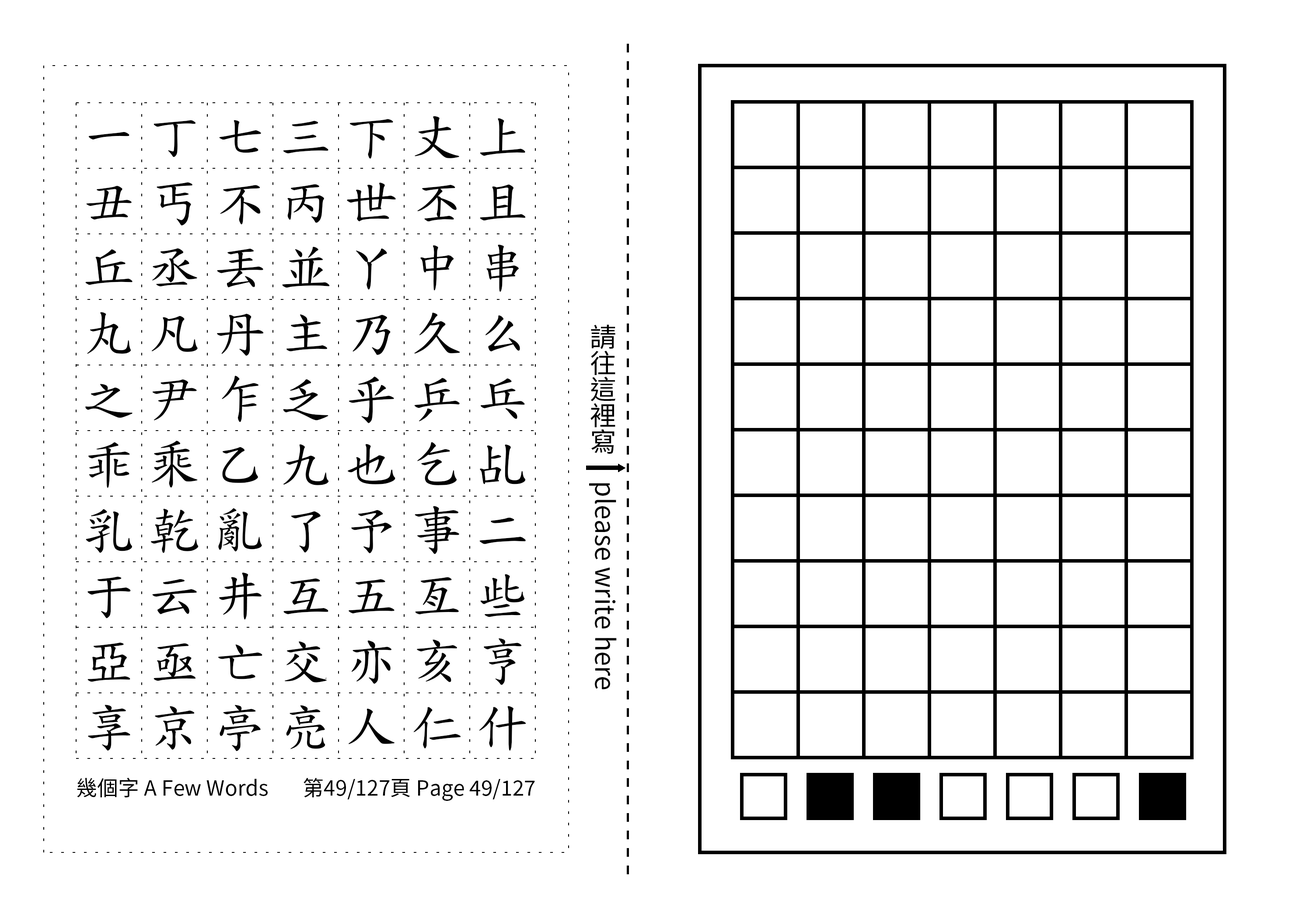
<style>
.page{position:relative;width:1299px;height:918px;background:#ffffff}
.page>*{position:absolute;margin:0}
.t1{font:52.5px/65.6px "TW-Kai-98_1";letter-spacing:0.25em;color:#000000}
.t2{font:26.2px "SourceHanSansTC-Regular";color:#000000}
.t3{font:21px "SourceHanSansTC-Regular";color:#000000}
</style>
<div class="page">
<p class="t1" style="left:85px;top:116px;width:441px;height:636px;text-align:center">一丁七三下丈上丑丐不丙世丕且丘丞丟並丫中串丸凡丹主乃久么之尹乍乏乎乒乓乖乘乙九也乞乩乳乾亂了予事二于云井互五亙些亞亟亡交亦亥亨享京亭亮人仁什</p>
<p class="t2" style="left:589px;top:324px;width:28px;height:366px;text-align:center">請往這裡寫　please write here</p>
<p class="t3" style="left:77px;top:778px;width:191px;height:20px">幾個字 A Few Words</p>
<p class="t3" style="left:303px;top:778px;width:232px;height:23px">第49/127頁 Page 49/127</p>
</div>
